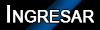
<style>
.page{position:relative;width:100px;height:30px;background:#000000}
.page>*{position:absolute;margin:0}
.t1{font:22.9px "ArialMT";color:#ffffff;font-variant:small-caps;font-weight:bold}
</style>
<div class="page">
<p class="t1" style="left:7px;top:5px;width:87px;height:18px">Ingresar</p>
</div>
